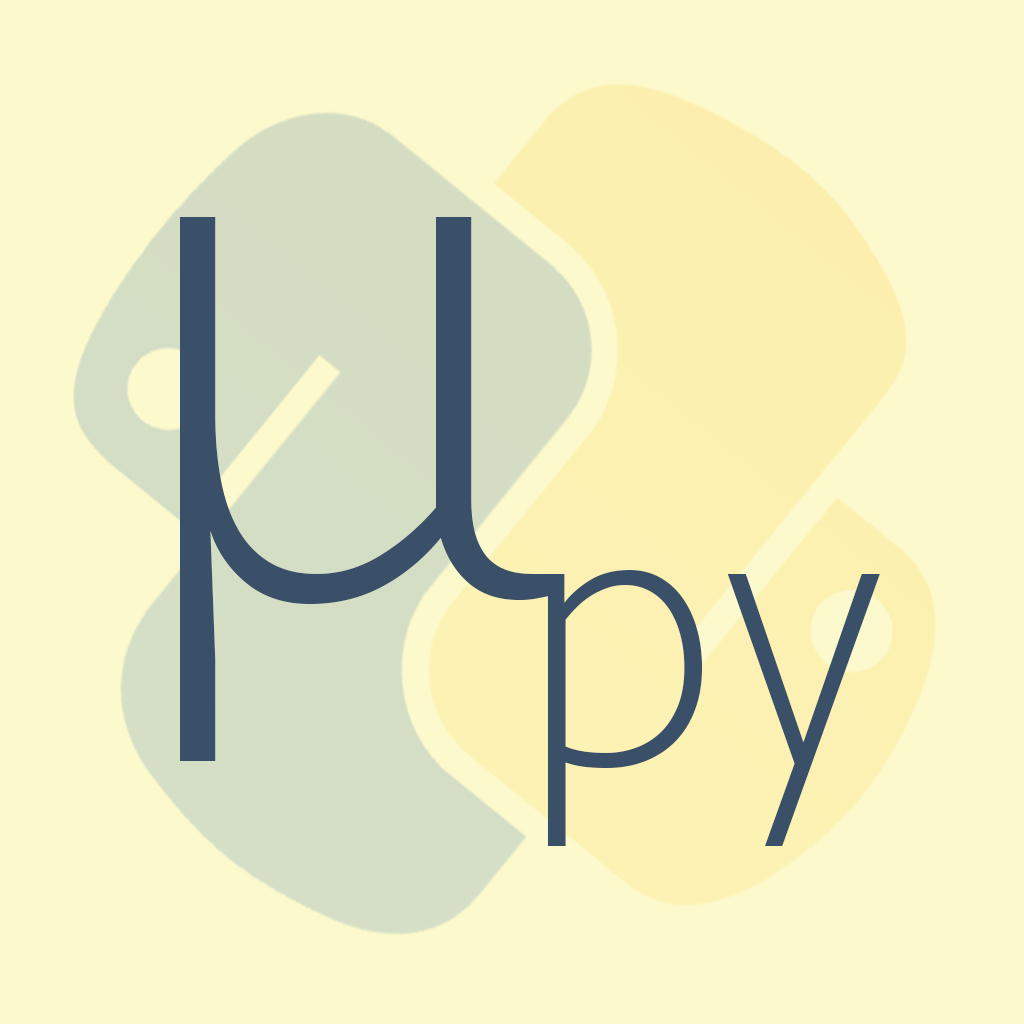
<style>
.page{position:relative;width:1024px;height:1024px;background:#fcf9cc}
.page>*{position:absolute;margin:0}
.t1{font:800px "Seravek-ExtraLight";color:#3a5069}
.t2{font:400px "Seravek-ExtraLight";color:#3a5069}
</style>
<div class="page">
<p class="t1" style="left:180px;top:217px;width:369px;height:544px">μ</p>
<p class="t2" style="left:547px;top:570px;width:333px;height:276px">py</p>
</div>
